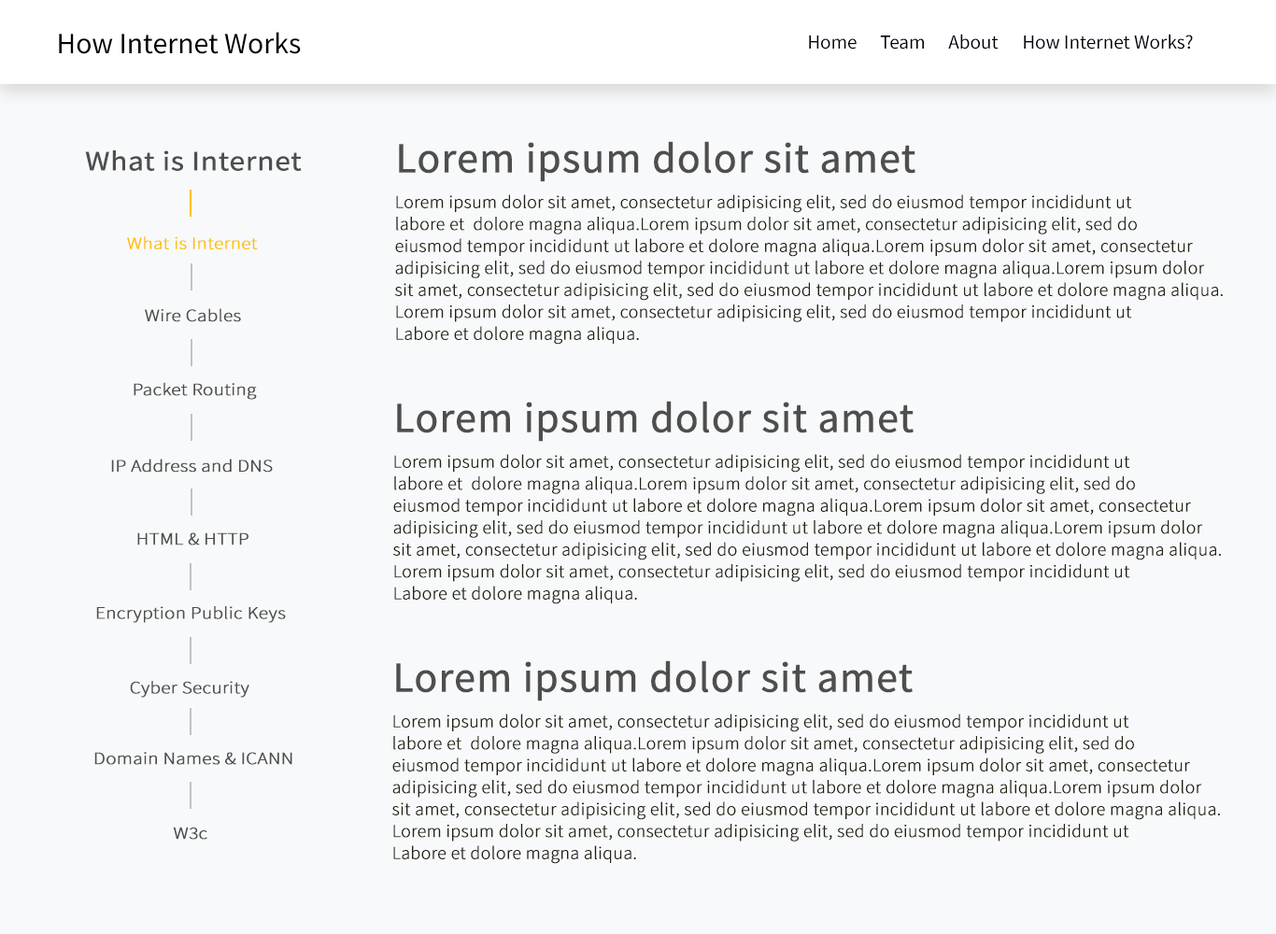
<style>
.page{position:relative;width:1276px;height:934px;background:#f8f9fa}
.page>*{position:absolute;margin:0}
.t1{font:29.7px "SourceSansPro-Regular";color:#000000}
.t2{font:19.8px "SourceSansPro-Regular";color:#00000e}
.t3{font:42.8px "SourceSansPro-Regular";color:#4e4e4e;font-weight:bold}
.t4{font:27.7px "SourceSansPro-Regular";color:#4e4e4e;font-weight:bold;scale:1.12 1}
.t5{font:18.3px "SourceSansPro-Light";color:#212112;font-weight:bold}
.t6{font:17.3px "SourceSansPro-Light";color:#ffc000;font-weight:bold;scale:1.12 1}
.t7{font:17.3px "SourceSansPro-Light";color:#4e4e4e;font-weight:bold;scale:1.12 1}
</style>
<div class="page">
<p class="t1" style="left:59px;top:32px;width:242px;height:22px">How Internet Works</p>
<p class="t2" style="left:809px;top:36px;width:48px;height:14px">Home</p>
<p class="t2" style="left:880px;top:36px;width:44px;height:14px">Team</p>
<p class="t2" style="left:948px;top:34px;width:51px;height:16px">About</p>
<p class="t2" style="left:1024px;top:34px;width:169px;height:16px">How Internet Works?</p>
<p class="t3" style="left:399px;top:141px;width:517px;height:41px">Lorem ipsum dolor sit amet</p>
<p class="t4" style="left:85px;top:150px;width:217px;height:21px">What is Internet</p>
<p class="t5" style="left:395px;top:194px;width:828px;height:151px">Lorem ipsum dolor sit amet, consectetur adipisicing elit, sed do eiusmod tempor incididunt ut <br>labore et  dolore magna aliqua.Lorem ipsum dolor sit amet, consectetur adipisicing elit, sed do <br>eiusmod tempor incididunt ut labore et dolore magna aliqua.Lorem ipsum dolor sit amet, consectetur <br>adipisicing elit, sed do eiusmod tempor incididunt ut labore et dolore magna aliqua.Lorem ipsum dolor <br>sit amet, consectetur adipisicing elit, sed do eiusmod tempor incididunt ut labore et dolore magna aliqua.<br>Lorem ipsum dolor sit amet, consectetur adipisicing elit, sed do eiusmod tempor incididunt ut <br>Labore et dolore magna aliqua.</p>
<p class="t6" style="left:127px;top:236px;width:131px;height:13px">What is Internet</p>
<p class="t7" style="left:145px;top:308px;width:96px;height:14px">Wire Cables</p>
<p class="t7" style="left:134px;top:382px;width:123px;height:18px">Packet Routing</p>
<p class="t3" style="left:397px;top:401px;width:517px;height:41px">Lorem ipsum dolor sit amet</p>
<p class="t7" style="left:111px;top:459px;width:162px;height:14px">IP Address and DNS</p>
<p class="t5" style="left:393px;top:454px;width:828px;height:150px">Lorem ipsum dolor sit amet, consectetur adipisicing elit, sed do eiusmod tempor incididunt ut <br>labore et  dolore magna aliqua.Lorem ipsum dolor sit amet, consectetur adipisicing elit, sed do <br>eiusmod tempor incididunt ut labore et dolore magna aliqua.Lorem ipsum dolor sit amet, consectetur <br>adipisicing elit, sed do eiusmod tempor incididunt ut labore et dolore magna aliqua.Lorem ipsum dolor <br>sit amet, consectetur adipisicing elit, sed do eiusmod tempor incididunt ut labore et dolore magna aliqua.<br>Lorem ipsum dolor sit amet, consectetur adipisicing elit, sed do eiusmod tempor incididunt ut <br>Labore et dolore magna aliqua.</p>
<p class="t7" style="left:137px;top:533px;width:112px;height:13px">HTML &amp; HTTP</p>
<p class="t7" style="left:96px;top:606px;width:190px;height:17px">Encryption Public Keys</p>
<p class="t3" style="left:396px;top:661px;width:517px;height:41px">Lorem ipsum dolor sit amet</p>
<p class="t7" style="left:130px;top:681px;width:119px;height:17px">Cyber Security</p>
<p class="t5" style="left:392px;top:714px;width:828px;height:150px">Lorem ipsum dolor sit amet, consectetur adipisicing elit, sed do eiusmod tempor incididunt ut <br>labore et  dolore magna aliqua.Lorem ipsum dolor sit amet, consectetur adipisicing elit, sed do <br>eiusmod tempor incididunt ut labore et dolore magna aliqua.Lorem ipsum dolor sit amet, consectetur <br>adipisicing elit, sed do eiusmod tempor incididunt ut labore et dolore magna aliqua.Lorem ipsum dolor <br>sit amet, consectetur adipisicing elit, sed do eiusmod tempor incididunt ut labore et dolore magna aliqua.<br>Lorem ipsum dolor sit amet, consectetur adipisicing elit, sed do eiusmod tempor incididunt ut <br>Labore et dolore magna aliqua.</p>
<p class="t7" style="left:94px;top:752px;width:198px;height:13px">Domain Names &amp; ICANN</p>
<p class="t7" style="left:173px;top:827px;width:34px;height:13px">W3c</p>
</div>
